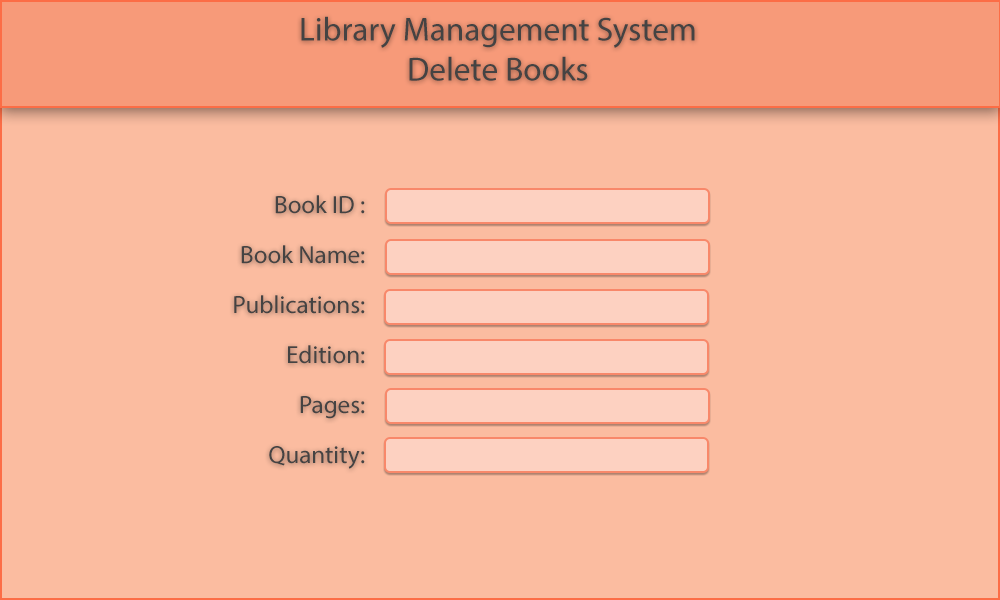
<style>
.page{position:relative;width:1000px;height:600px;background:#fbbca0}
.page>*{position:absolute;margin:0}
.t1{font:33.3px "MyriadPro-Regular";color:#444343}
.t2{font:25px/50px "MyriadPro-Regular";color:#444343}
</style>
<div class="page">
<p class="t1" style="left:301px;top:16px;width:394px;height:65px;text-align:center">Library Management System<br>Delete Books</p>
<p class="t2" style="left:234px;top:195px;width:131px;height:274px;text-align:right">Book ID : <br>Book Name:<br>Publications:<br>Edition:<br>Pages:<br>Quantity:</p>
</div>
